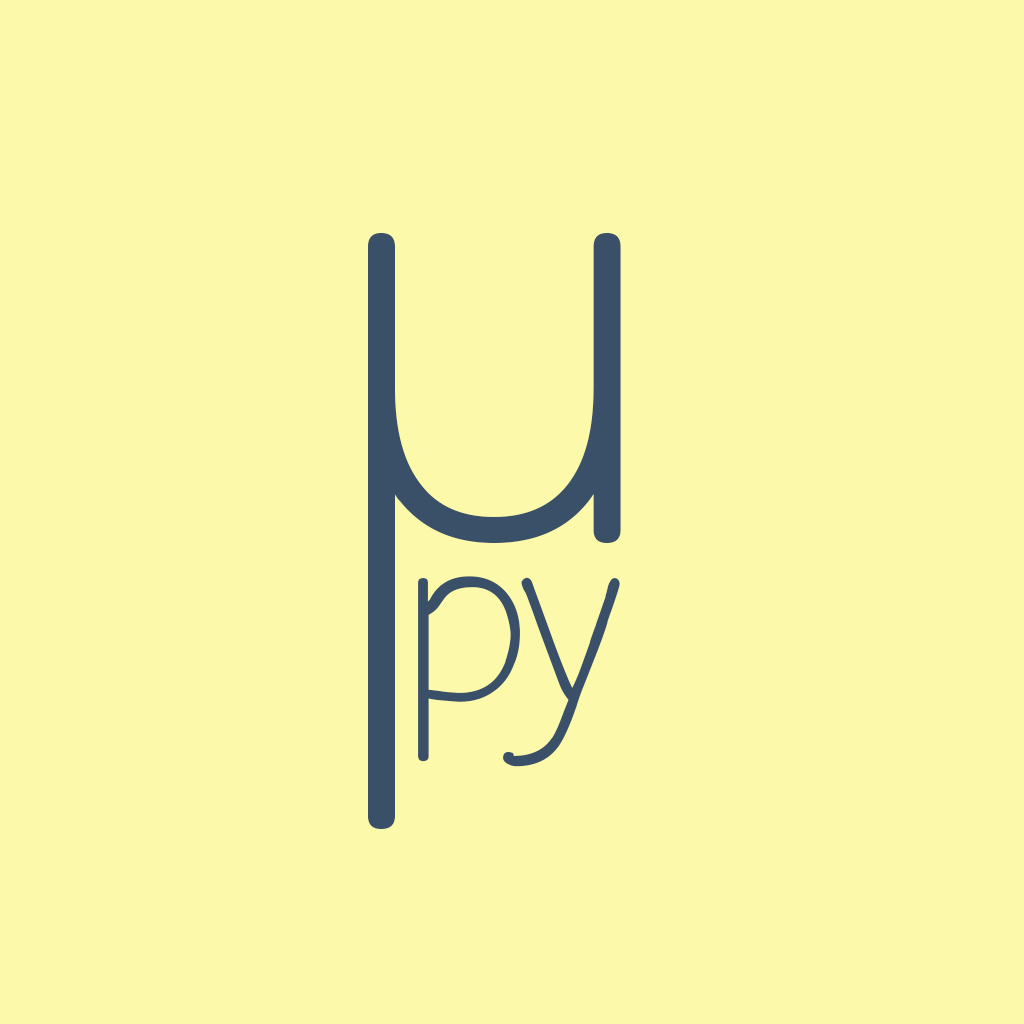
<style>
.page{position:relative;width:1024px;height:1024px;background:#fcfaaa}
.page>*{position:absolute;margin:0}
.t1{font:1200px "SimplePrint-Regular";color:#3a5069}
.t2{font:246px "OsgoodSans";color:#3a5069}
</style>
<div class="page">
<p class="t1" style="left:368px;top:233px;width:253px;height:596px">μ</p>
<p class="t2" style="left:418px;top:576px;width:202px;height:191px">py</p>
</div>
